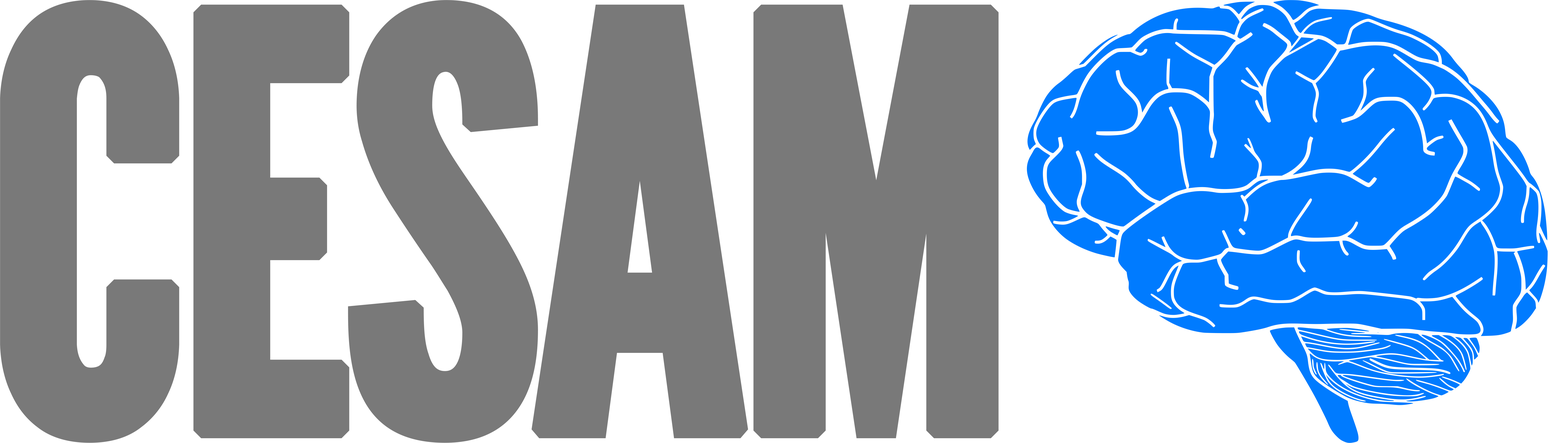
<style>
.page{position:relative;width:1568px;height:443px;background:#797979}
.page>*{position:absolute;margin:0}
.t1{font:568.6px "LeagueGothic-Regular";letter-spacing:-0.04em;color:#797979;text-transform:uppercase;font-weight:bold}
</style>
<div class="page">
<p class="t1" style="left:0px;top:0px;width:999px;height:443px">cesam</p>
</div>
